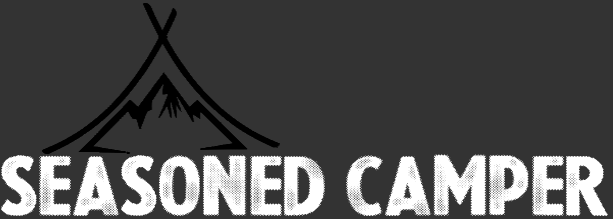
<style>
.page{position:relative;width:613px;height:219px;background:#333333}
.page>*{position:absolute;margin:0}
.t1{font:69.4px "HalftonedBackup";color:#ffffff;scale:1.13 1}
</style>
<div class="page">
<p class="t1" style="left:1px;top:154px;width:607px;height:62px">SEASONED CAMPER</p>
</div>
